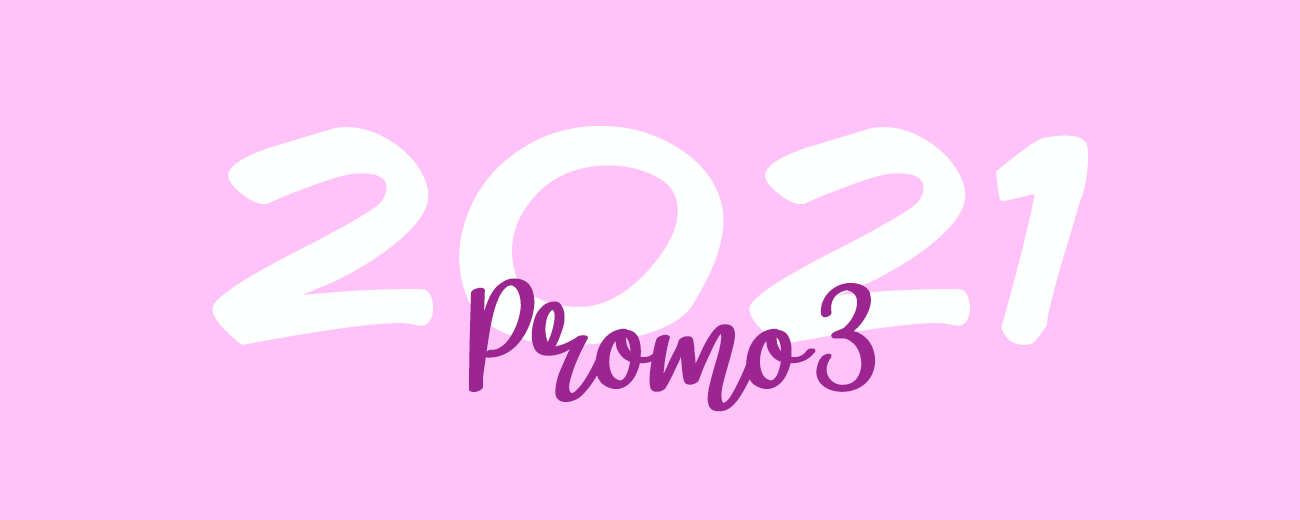
<style>
.page{position:relative;width:1300px;height:520px;background:#ffc3fa}
.page>*{position:absolute;margin:0}
.t1{font:300px "ComicBook";color:#feffff;scale:1.2 1}
.t2{font:200px "magiclove";color:#9c2592;scale:1.2 1}
</style>
<div class="page">
<p class="t1" style="left:212px;top:126px;width:876px;height:219px">2021</p>
<p class="t1" style="left:212px;top:126px;width:876px;height:219px">2021</p>
<p class="t1" style="left:212px;top:126px;width:876px;height:219px">2021</p>
<p class="t2" style="left:469px;top:278px;width:387px;height:134px">Promo1</p>
<p class="t2" style="left:469px;top:278px;width:417px;height:134px">Promo2</p>
<p class="t2" style="left:469px;top:278px;width:407px;height:134px">Promo3</p>
</div>
